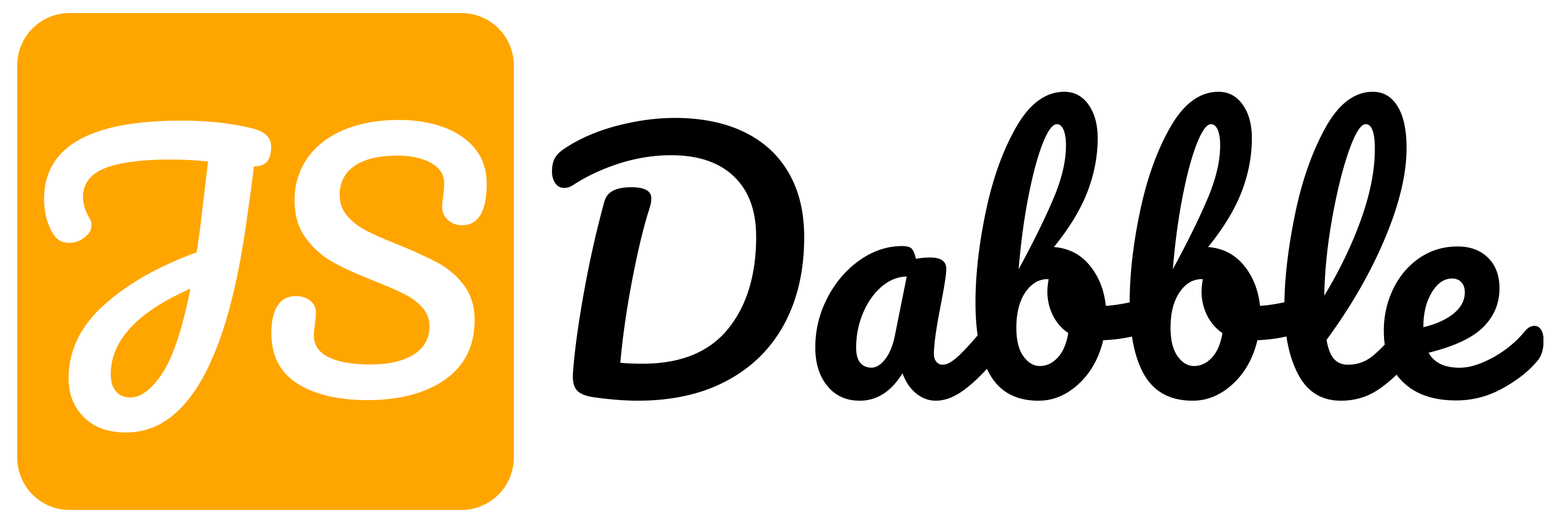
<style>
.page{position:relative;width:1568px;height:523px;background:#ffffff}
.page>*{position:absolute;margin:0}
.t1{font:326.7px "Pacifico-Regular";color:#000000}
</style>
<div class="page">
<p class="t1" style="left:552px;top:91px;width:991px;height:310px">Dabble</p>
</div>
